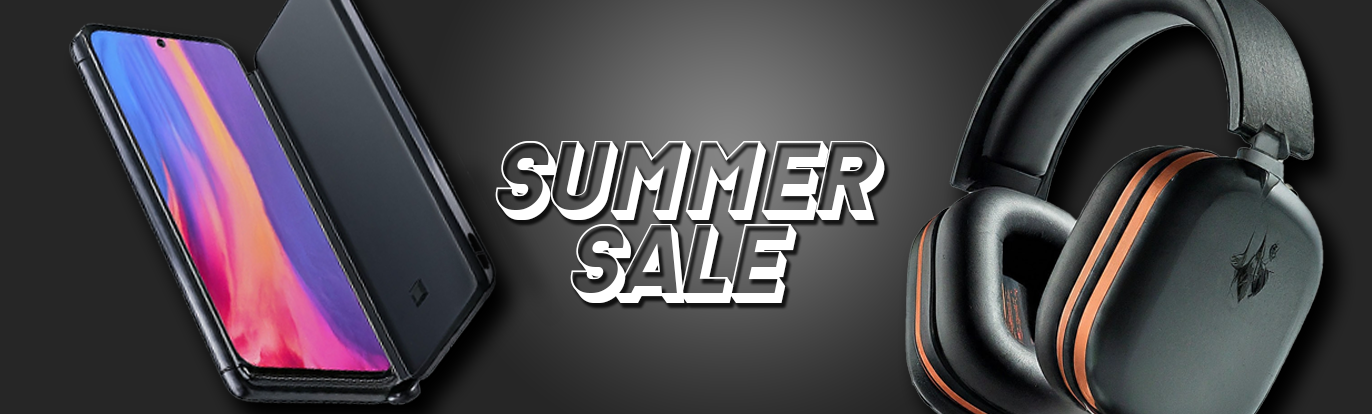
<style>
.page{position:relative;width:1372px;height:414px}
.page>*{position:absolute;margin:0}
.t1{font:117.3px "Antology-Regular";color:#ffffff}
</style>
<div class="page">
<p class="t1" style="left:495px;top:141px;width:390px;height:79px">SUMMER</p>
<p class="t1" style="left:570px;top:224px;width:227px;height:79px">SALE</p>
</div>
